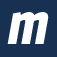
<style>
.page{position:relative;width:57px;height:57px;background:#183152}
.page>*{position:absolute;margin:0}
.t1{font:65px "Klavika-BoldCondensedItalic";letter-spacing:-0.005em;color:#ffffff}
</style>
<div class="page">
<p class="t1" style="left:7px;top:12px;width:42px;height:32px">m</p>
</div>
